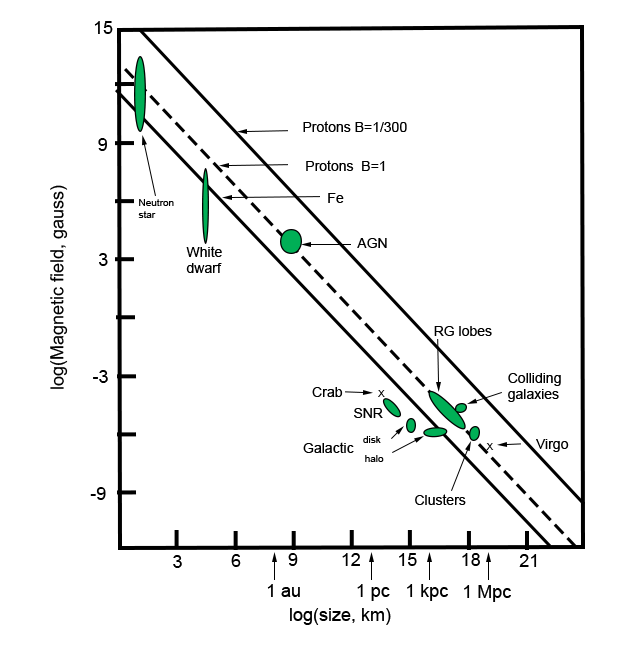
<style>
.page{position:relative;width:631px;height:646px;background:#ffffff}
.page>*{position:absolute;margin:0}
.t1{font:18px "ArialMT";color:#000000}
.t2{font:14px "ArialMT";color:#000000}
.t3{font:10px "ArialMT";color:#000000}
.t4{font:10px "ArialMT"}
</style>
<div class="page">
<p class="t1" style="left:94px;top:21px;width:19px;height:13px">15</p>
<p class="t2" style="left:303px;top:121px;width:104px;height:11px">Protons B=1/300</p>
<p class="t1" style="left:98px;top:138px;width:9px;height:13px">9</p>
<p class="t2" style="left:306px;top:160px;width:79px;height:11px">Protons  B=1</p>
<p class="t1" style="left:50px;top:185px;width:18px;height:204px;rotate:-90deg">log(Magnetic field, gauss)</p>
<p class="t2" style="left:328px;top:193px;width:16px;height:10px">Fe</p>
<p class="t3" style="left:138px;top:199px;width:36px;height:19px">Neutron<br>star</p>
<p class="t2" style="left:186px;top:246px;width:36px;height:27px">White<br>dwarf</p>
<p class="t2" style="left:357px;top:238px;width:30px;height:10px">AGN</p>
<p class="t1" style="left:99px;top:253px;width:9px;height:13px">3</p>
<p class="t2" style="left:434px;top:326px;width:58px;height:10px">RG lobes</p>
<p class="t1" style="left:93px;top:370px;width:15px;height:13px">-3</p>
<p class="t2" style="left:508px;top:373px;width:53px;height:29px">Colliding<br>galaxies</p>
<p class="t2" style="left:312px;top:387px;width:31px;height:10px">Crab</p>
<p class="t3" style="left:378px;top:390px;width:7px;height:7px">X</p>
<p class="t2" style="left:354px;top:408px;width:29px;height:10px">SNR</p>
<p class="t3" style="left:363px;top:436px;width:18px;height:7px">disk</p>
<p class="t2" style="left:303px;top:442px;width:51px;height:11px">Galactic</p>
<p class="t4" style="left:486px;top:443px;width:8px;height:7px">X</p>
<p class="t2" style="left:536px;top:439px;width:33px;height:13px">Virgo</p>
<p class="t3" style="left:365px;top:455px;width:19px;height:7px">halo</p>
<p class="t1" style="left:90px;top:487px;width:16px;height:13px">-9</p>
<p class="t2" style="left:415px;top:494px;width:51px;height:11px">Clusters</p>
<p class="t1" style="left:173px;top:555px;width:9px;height:13px">3</p>
<p class="t1" style="left:231px;top:554px;width:10px;height:13px">6</p>
<p class="t1" style="left:288px;top:553px;width:10px;height:13px">9</p>
<p class="t1" style="left:342px;top:553px;width:18px;height:13px">12</p>
<p class="t1" style="left:399px;top:553px;width:18px;height:13px">15</p>
<p class="t1" style="left:462px;top:553px;width:18px;height:13px">18</p>
<p class="t1" style="left:519px;top:554px;width:18px;height:13px">21</p>
<p class="t1" style="left:267px;top:584px;width:33px;height:13px">1 au</p>
<p class="t1" style="left:357px;top:584px;width:33px;height:17px">1 pc</p>
<p class="t1" style="left:407px;top:584px;width:41px;height:17px">1 kpc</p>
<p class="t1" style="left:464px;top:585px;width:47px;height:17px">1 Mpc</p>
<p class="t1" style="left:290px;top:608px;width:101px;height:17px">log(size, km)</p>
</div>
